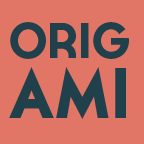
<style>
.page{position:relative;width:144px;height:144px;background:#e17666}
.page>*{position:absolute;margin:0}
.t1{font:50px/60px "Cassannet-Bold";color:#20404b}
.t2{font:71px/60px "Cassannet-Bold";color:#20404b}
</style>
<div class="page">
<p class="t1" style="left:9px;top:22px;width:120px;height:97px">ORIG<br><span class="t2">AMI</span></p>
</div>
